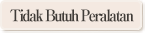
<style>
.page{position:relative;width:145px;height:33px;background:#f4e9e1}
.page>*{position:absolute;margin:0}
.t1{font:16px "RyuminPro-ExBold";letter-spacing:-0.12em;color:#403c38;scale:0.9 1}
</style>
<div class="page">
<p class="t1" style="left:10px;top:9px;width:124px;height:13px">Tidak Butuh Peralatan</p>
</div>
